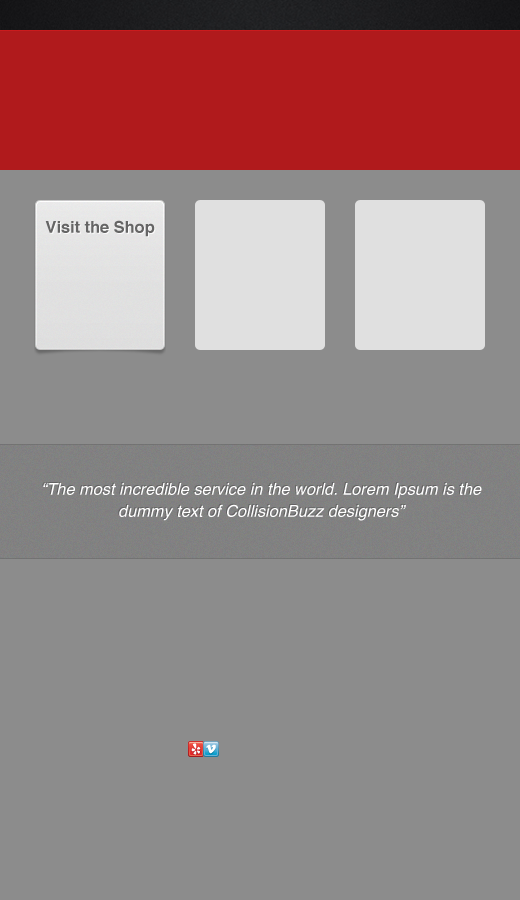
<style>
.page{position:relative;width:520px;height:900px;background:#8c8c8c}
.page>*{position:absolute;margin:0}
.t1{font:28px "Helvetica-Bold";color:#656565}
.t2{font:28px "Helvetica-Oblique";color:#ffffff}
</style>
<div class="page">
<p class="t1" style="left:45px;top:220px;width:110px;height:17px">Visit the Shop</p>
<p class="t2" style="left:43px;top:483px;width:439px;height:38px">“The most incredible service in the world. Lorem Ipsum is the dummy text of CollisionBuzz designers”</p>
</div>
